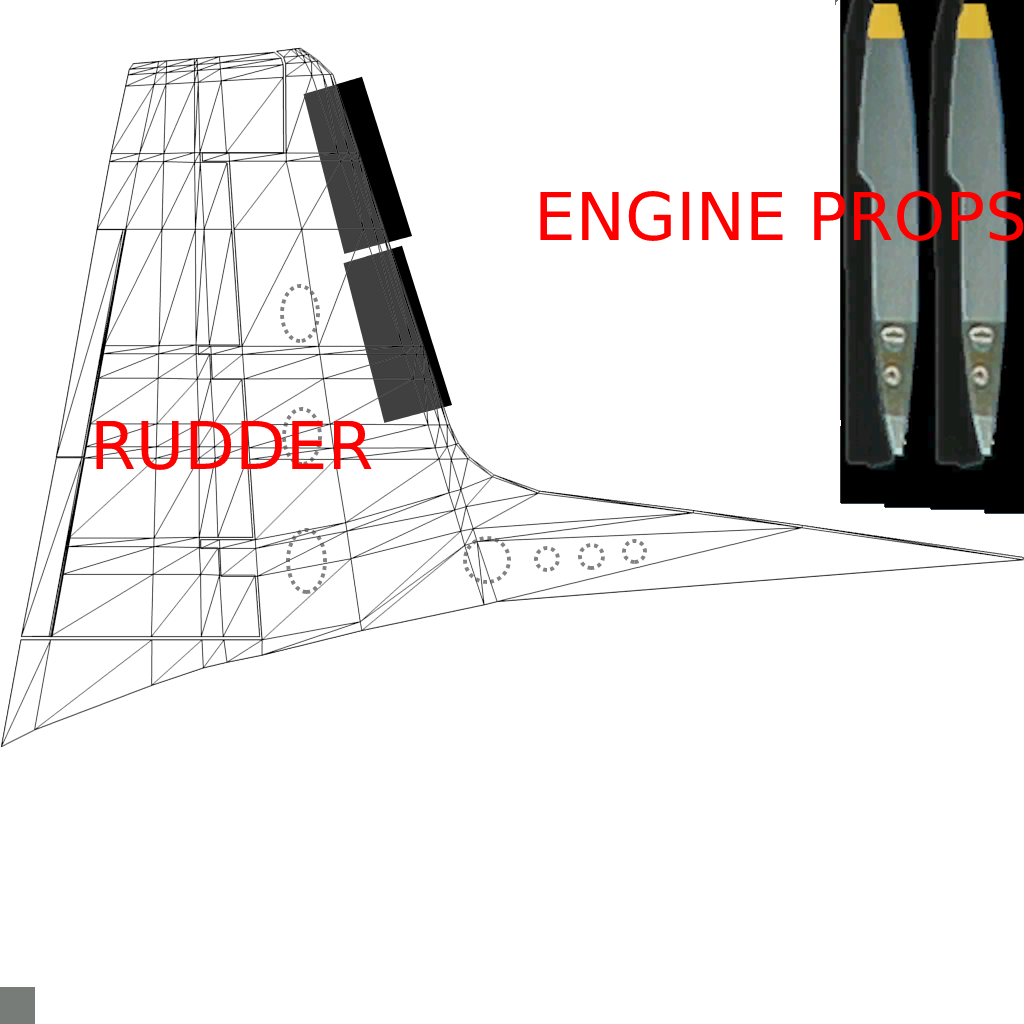
<style>
.page{position:relative;width:1024px;height:1024px;background:#ffffff}
.page>*{position:absolute;margin:0}
.t1{font:66px "DejaVuSans";color:#ff0000}
</style>
<div class="page">
<p class="t1" style="left:540px;top:191px;width:484px;height:50px">ENGINE PROPS</p>
<p class="t1" style="left:96px;top:420px;width:276px;height:50px">RUDDER</p>
</div>
